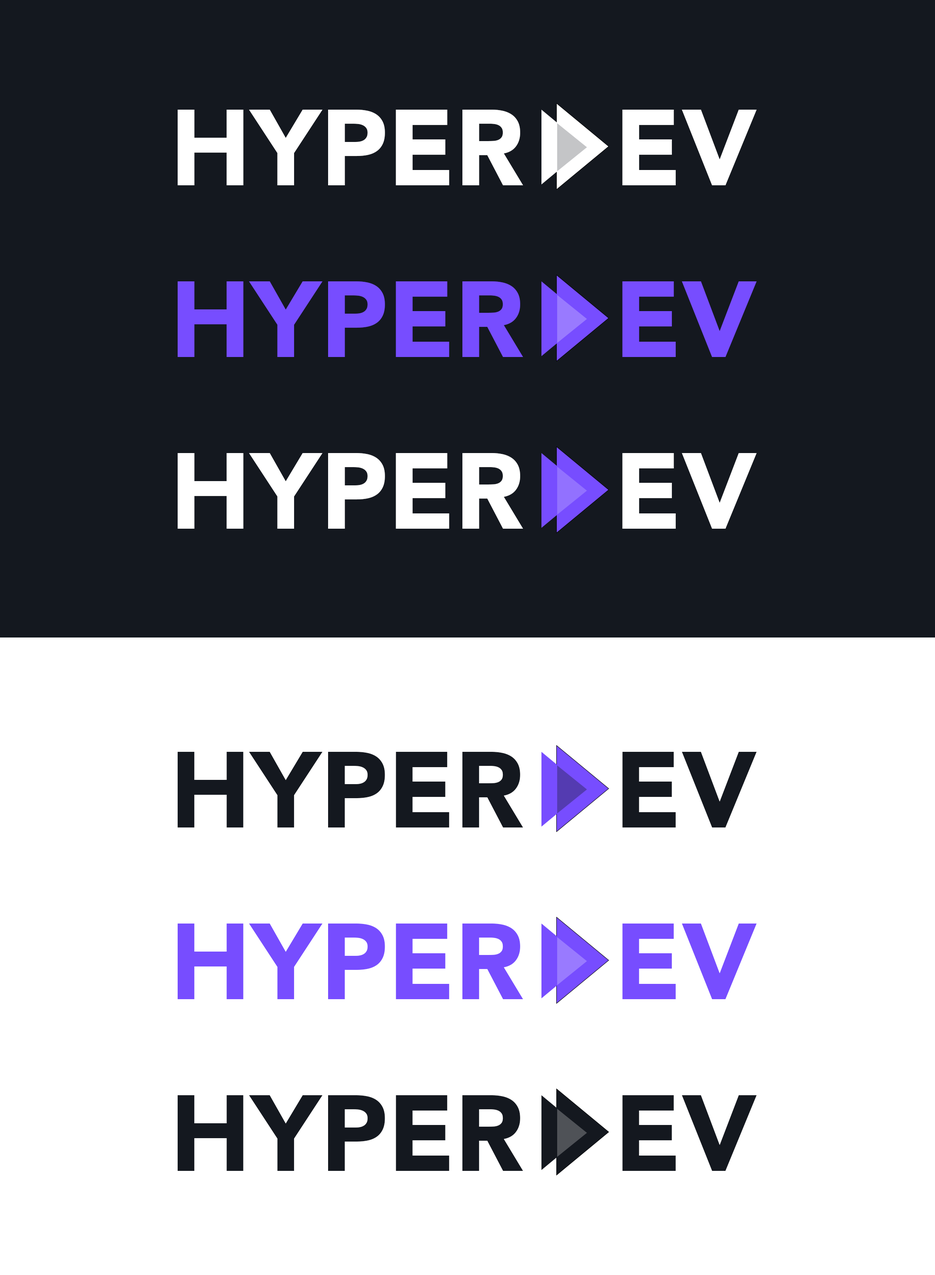
<style>
.page{position:relative;width:935px;height:1275px;background:#ffffff}
.page>*{position:absolute;margin:0}
.t1{font:106.7px "Avenir-Black";color:#ffffff;text-transform:uppercase}
.t2{font:106.7px "Avenir-Black";color:#774dff;text-transform:uppercase}
.t3{font:106.7px "Avenir-Black";color:#14181f;text-transform:uppercase}
</style>
<div class="page">
<p class="t1" style="left:178px;top:110px;width:579px;height:75px">Hyper   ev</p>
<p class="t2" style="left:178px;top:281px;width:579px;height:76px">Hyper   ev</p>
<p class="t1" style="left:178px;top:453px;width:579px;height:76px">Hyper   ev</p>
<p class="t3" style="left:178px;top:752px;width:579px;height:76px">Hyper   ev</p>
<p class="t2" style="left:178px;top:924px;width:579px;height:75px">Hyper   ev</p>
<p class="t3" style="left:178px;top:1095px;width:579px;height:76px">Hyper   ev</p>
</div>
